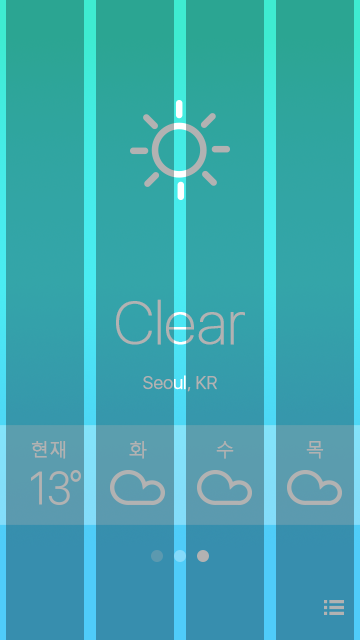
<style>
.page{position:relative;width:360px;height:640px}
.page>*{position:absolute;margin:0}
.t1{font:60px "SFUIDisplay-Thin";color:#b2b2b2;font-weight:bold}
.t2{font:18px "SFUIDisplay-Light";color:#b2b2b2;font-weight:bold}
.t3{font:18px "MalgunGothic-Semilight";color:#b2b2b2;font-weight:bold}
</style>
<div class="page">
<p class="t1" style="left:116px;top:299px;width:129px;height:46px">Clear</p>
<p class="t2" style="left:143px;top:375px;width:74px;height:17px">Seoul, KR</p>
<p class="t3" style="left:31px;top:441px;width:35px;height:18px">현재</p>
<p class="t3" style="left:129px;top:441px;width:18px;height:18px">화</p>
<p class="t3" style="left:216px;top:441px;width:18px;height:18px">수</p>
<p class="t3" style="left:306px;top:441px;width:18px;height:18px">목</p>
</div>
